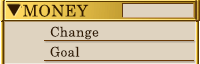
<style>
.page{position:relative;width:200px;height:64px;background:#dfd3c0}
.page>*{position:absolute;margin:0}
.t1{font:16px "CenturySchoolbook";letter-spacing:0.025em;color:#321a02}
.t2{font:13.3px "CenturySchoolbook";letter-spacing:0.025em;color:#321a02}
</style>
<div class="page">
<p class="t1" style="left:23px;top:4px;width:66px;height:13px">MONEY</p>
<p class="t2" style="left:50px;top:26px;width:49px;height:14px">Change</p>
<p class="t2" style="left:50px;top:46px;width:30px;height:11px">Goal</p>
</div>
